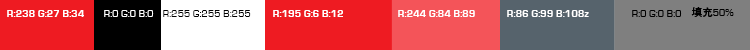
<style>
.page{position:relative;width:750px;height:50px;background:#ee1b22}
.page>*{position:absolute;margin:0}
.t1{font:10.4px "EurostileBold";color:#ffffff}
.t2{font:10.4px "EurostileRegular";color:#ffffff}
.t3{font:10.4px "EurostileRegular";color:#000000}
.t4{font:10.4px "AdobeHeitiStd-Regular";color:#000000}
</style>
<div class="page">
<p class="t1" style="left:7px;top:10px;width:77px;height:7px">R:238 G:27 B:34</p>
<p class="t2" style="left:104px;top:10px;width:50px;height:7px">R:0 G:0 B:0</p>
<p class="t3" style="left:163px;top:10px;width:88px;height:7px">R:255 G:255 B:255</p>
<p class="t1" style="left:273px;top:10px;width:70px;height:7px">R:195 G:6 B:12</p>
<p class="t1" style="left:398px;top:10px;width:77px;height:7px">R:244 G:84 B:89</p>
<p class="t1" style="left:507px;top:10px;width:82px;height:7px">R:86 G:99 B:108z</p>
<p class="t3" style="left:632px;top:10px;width:50px;height:7px">R:0 G:0 B:0</p>
<p class="t3" style="left:691px;top:7px;width:43px;height:10px"><span class="t4">填充</span>50%</p>
</div>
